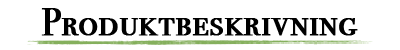
<style>
.page{position:relative;width:400px;height:50px;background:#ffffff}
.page>*{position:absolute;margin:0}
.t1{font:38px "BodoniSvtyTwoSCITCTTBook";color:#000000;font-weight:bold}
</style>
<div class="page">
<p class="t1" style="left:41px;top:8px;width:317px;height:28px">Produktbeskrivning</p>
</div>
